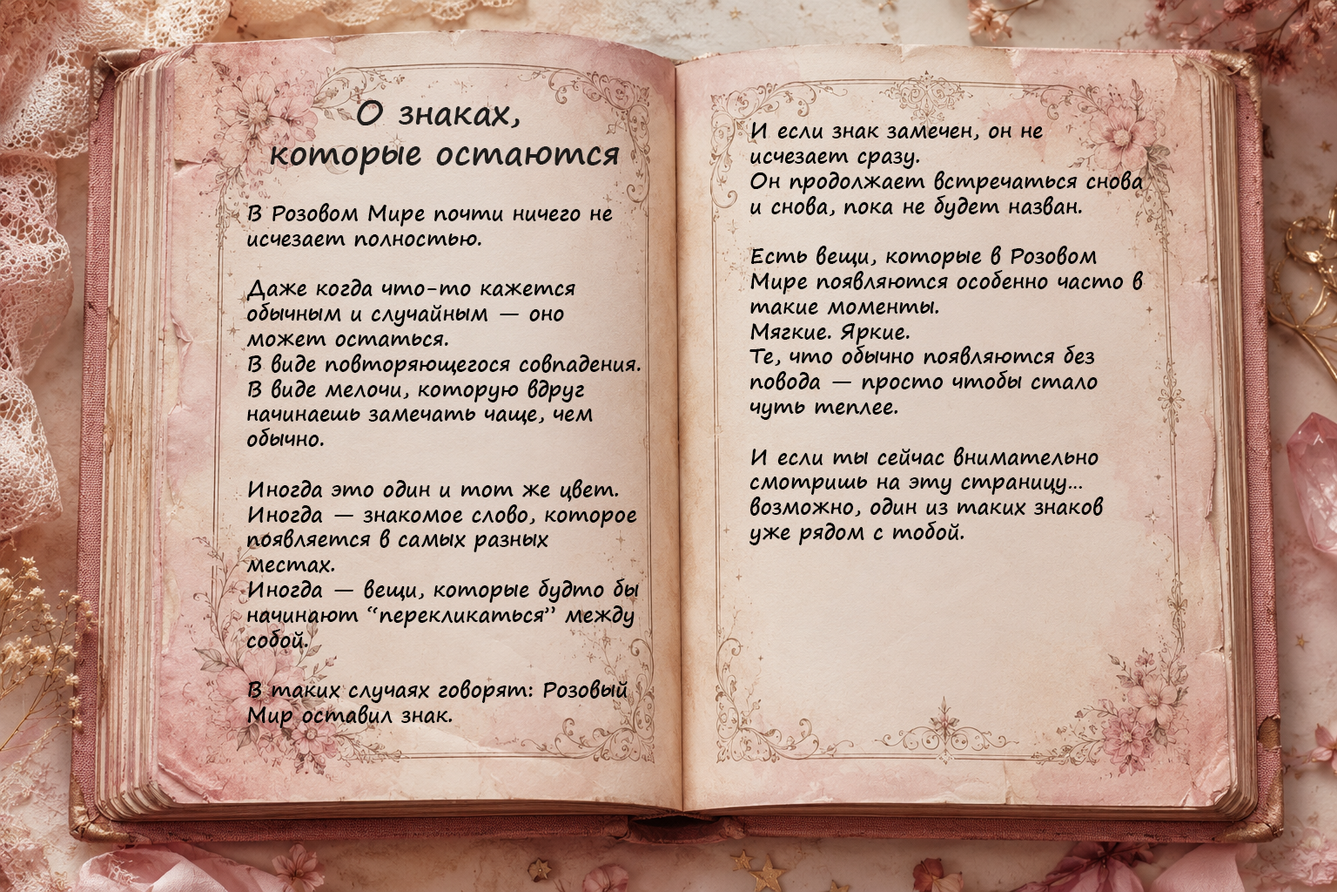
<style>
.page{position:relative;width:1337px;height:892px}
.page>*{position:absolute;margin:0}
.t1{font:33.1px "SegoePrint-Bold";color:#1f1d1b}
.t2{font:20.9px "SegoePrint-Bold";color:#000000}
</style>
<div class="page">
<p class="t1" style="left:270px;top:100px;width:350px;height:75px;text-align:center">О знаках, <br>которые остаются</p>
<p class="t2" style="left:750px;top:122px;width:393px;height:423px">И если знак замечен, он не исчезает сразу.  <br>Он продолжает встречаться снова и снова, пока не будет назван.<br><br>Есть вещи, которые в Розовом Мире появляются особенно часто в такие моменты.  <br>Мягкие. Яркие.  <br>Те, что обычно появляются без повода — просто чтобы стало чуть теплее.<br><br>И если ты сейчас внимательно смотришь на эту страницу…  <br>возможно, один из таких знаков уже рядом с тобой.</p>
<p class="t2" style="left:246px;top:203px;width:395px;height:525px">В Розовом Мире почти ничего не исчезает полностью.<br><br>Даже когда что-то кажется обычным и случайным — оно может остаться.  <br>В виде повторяющегося совпадения.  <br>В виде мелочи, которую вдруг начинаешь замечать чаще, чем обычно.<br><br>Иногда это один и тот же цвет.  <br>Иногда — знакомое слово, которое появляется в самых разных местах.  <br>Иногда — вещи, которые будто бы начинают “перекликаться” между собой.<br><br>В таких случаях говорят: Розовый Мир оставил знак.<br><br>И если знак замечен, он не исчезает сразу.  <br>Он продолжает встречаться снова и снова, пока не будет назван.<br><br>Есть вещи, которые в Розовом Мире появляются особенно часто в такие моменты.  <br>Мягкие. Яркие.  <br>Те, что обычно появляются без повода — просто чтобы стало чуть теплее.<br><br>И если ты сейчас внимательно смотришь на эту страницу…  <br>возможно, один из таких знаков уже рядом с тобой.</p>
</div>
